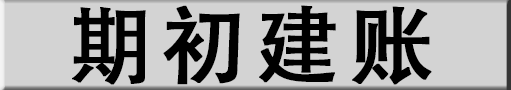
<style>
.page{position:relative;width:511px;height:90px;background:#d3d3d3}
.page>*{position:absolute;margin:0}
.t1{font:85.1px "AdobeHeitiStd-Regular";letter-spacing:0.075em;color:#000000;font-weight:bold}
</style>
<div class="page">
<p class="t1" style="left:72px;top:5px;width:360px;height:80px">期初建账</p>
</div>
